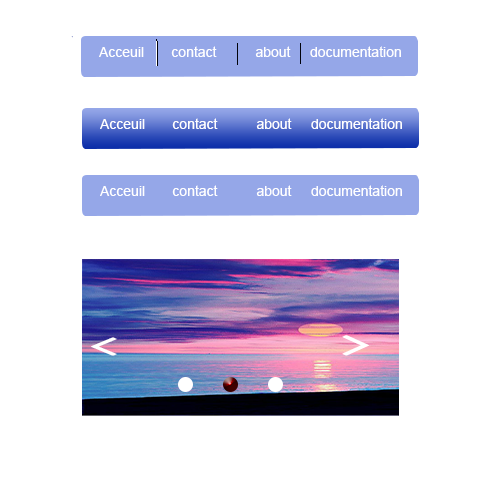
<style>
.page{position:relative;width:500px;height:500px;background:#ffffff}
.page>*{position:absolute;margin:0}
.t1{font:1px "ArialMT"}
.t2{font:14px "ArialMT";color:#ffffff}
</style>
<div class="page">
<p class="t1" style="left:71px;top:36px;width:2px;height:2px">A</p>
<p class="t2" style="left:99px;top:46px;width:302px;height:11px">Acceuil       contact          about     documentation</p>
<p class="t2" style="left:100px;top:118px;width:302px;height:11px">Acceuil       contact          about     documentation</p>
<p class="t2" style="left:100px;top:185px;width:302px;height:11px">Acceuil       contact          about     documentation</p>
</div>
